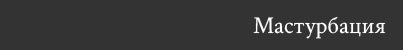
<style>
.page{position:relative;width:403px;height:50px;background:#333333}
.page>*{position:absolute;margin:0}
.t1{font:24px "CrimsonText-Regular";color:#ffffff}
</style>
<div class="page">
<p class="t1" style="left:253px;top:16px;width:133px;height:23px">Мастурбация</p>
</div>
